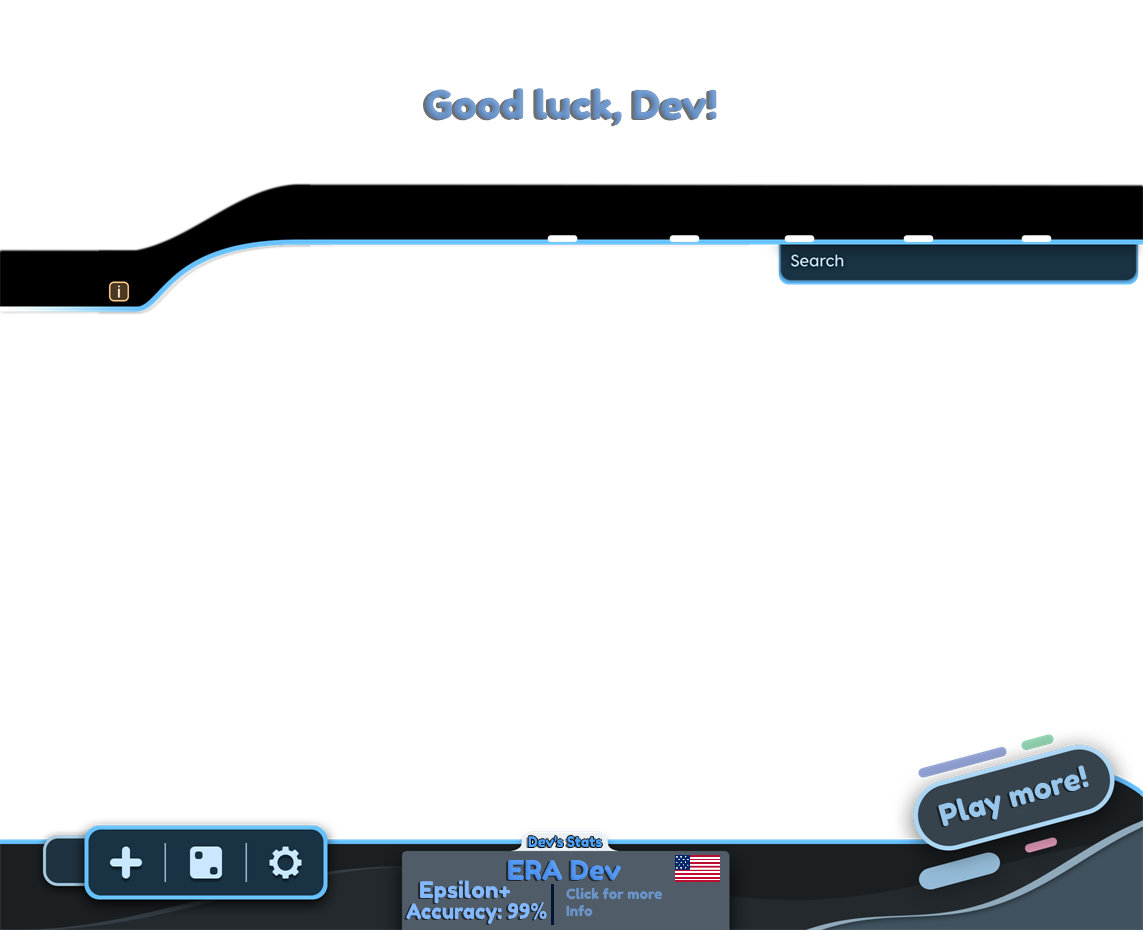
<style>
.page{position:relative;width:1143px;height:930px;background:#ffffff}
.page>*{position:absolute;margin:0}
.t1{font:39.7px "FredokaOne-Regular";color:#6b95ca}
.t2{font:30px "FredokaOne-Regular";color:#95caf7}
.t3{font:14.6px "FredokaOne-Regular";color:#49a3ff;scale:0.95 1}
.t4{font:14.6px "FredokaOne-Regular";color:#505d68;scale:0.95 1}
.t5{font:27.4px "FredokaOne-Regular";color:#5096f5}
.t6{font:22.7px "FredokaOne-Regular";color:#6eb5f1}
.t7{font:14.2px "FredokaOne-Regular";color:#6b95ca}
.t8{font:21.6px "FredokaOne-Regular";color:#6eb5f1;scale:0.94 1}
</style>
<div class="page">
<p class="t1" style="left:426px;top:88px;width:291px;height:38px">Good luck, Dev!</p>
<p class="t2" style="left:938px;top:765px;width:151px;height:61px;rotate:-16deg">Play more!</p>
<p class="t3" style="left:528px;top:836px;width:74px;height:12px"><span class="t4">D</span>ev's Stats</p>
<p class="t5" style="left:508px;top:859px;width:113px;height:22px">ERA Dev</p>
<p class="t6" style="left:420px;top:880px;width:91px;height:24px">Epsilon+</p>
<p class="t7" style="left:566px;top:887px;width:96px;height:30px">Click for more<br>Info</p>
<p class="t8" style="left:406px;top:902px;width:141px;height:22px">Accuracy: 99%</p>
</div>
